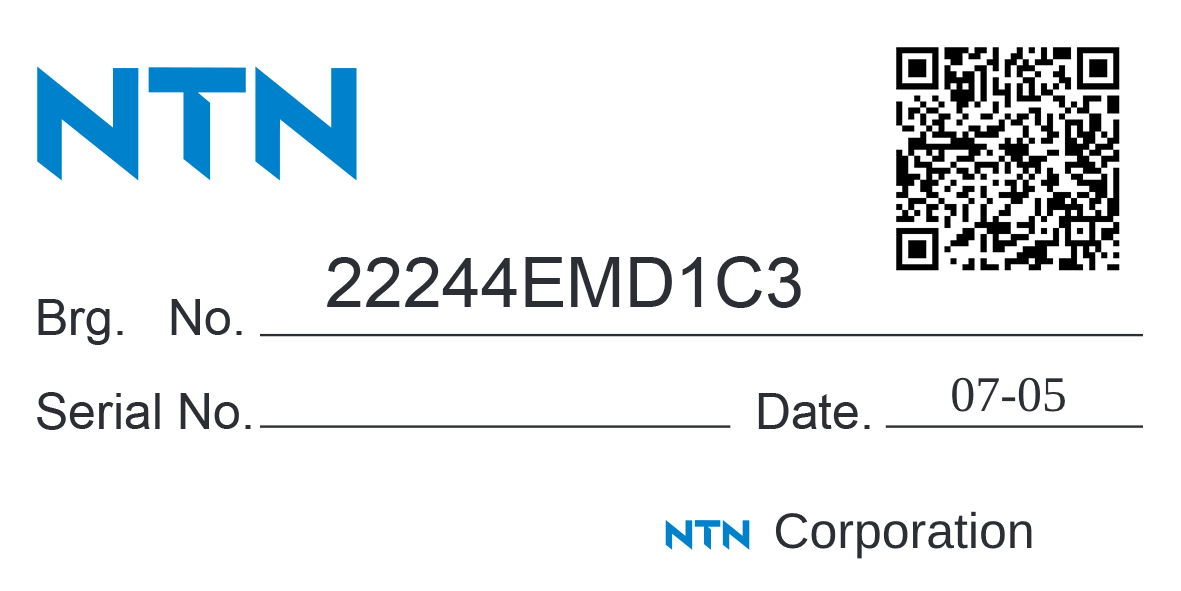
<style>
.page{position:relative;width:1181px;height:591px;background:#ffffff}
.page>*{position:absolute;margin:0}
.t1{font:70px "ArialMT";color:#2c2e35}
.t2{font:50px "ArialMT";color:#2c2e35}
.t3{font:50px "TimesNewRomanPSMT";color:#2c2e35}
</style>
<div class="page">
<p class="t1" style="left:327px;top:256px;width:474px;height:52px">22244EMD1C3</p>
<p class="t2" style="left:37px;top:299px;width:833px;height:131px">Brg.   No.<br><br>Serial No.                                    Date.</p>
<p class="t3" style="left:952px;top:377px;width:113px;height:35px">07-05</p>
<p class="t2" style="left:775px;top:511px;width:257px;height:48px">Corporation</p>
</div>
